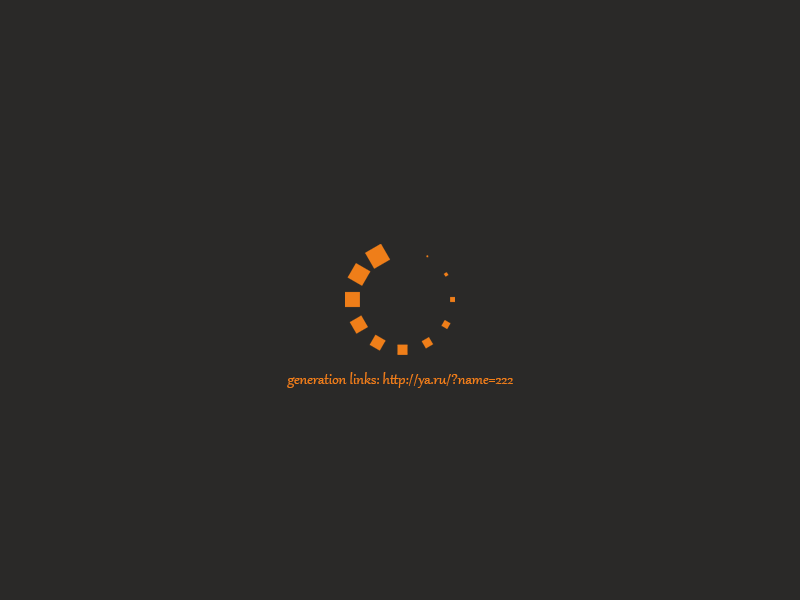
<style>
.page{position:relative;width:800px;height:600px;background:#2a2928}
.page>*{position:absolute;margin:0}
.t1{font:18px "Gabriola";color:#ef7e19}
</style>
<div class="page">
<p class="t1" style="left:287px;top:372px;width:226px;height:16px">generation links: http://ya.ru/?name=222</p>
</div>
